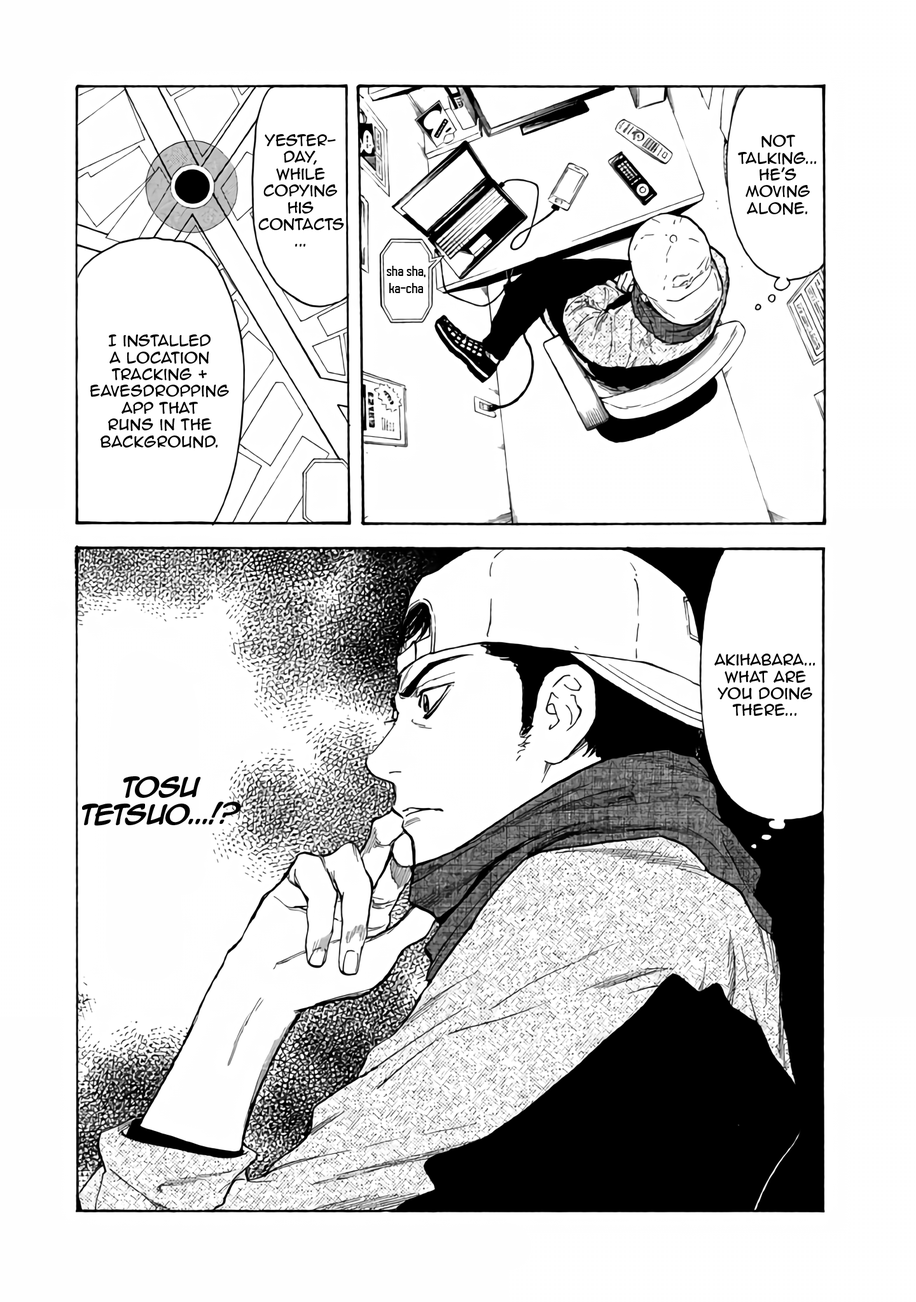
<style>
.page{position:relative;width:916px;height:1302px;background:#ffffff}
.page>*{position:absolute;margin:0}
.t1{font:14px "AnimeAce2.0BB";color:#000000}
.t2{font:14px "AutobusBold";color:#000000}
.t3{font:22.9px "AnimeAce2.0BB-Bold";color:#000000}
</style>
<div class="page">
<p class="t1" style="left:258px;top:134px;width:86px;height:113px;text-align:center">Yester-<br>day, while copying his contacts...</p>
<p class="t1" style="left:738px;top:135px;width:78px;height:80px;text-align:center">Not talking... He’s moving alone.</p>
<p class="t2" style="left:387px;top:266px;width:38px;height:27px;text-align:center">sha sha, <br>ka-cha</p>
<p class="t1" style="left:90px;top:334px;width:139px;height:114px;text-align:center">I installed a location tracking + eavesdropping app that runs in the background.</p>
<p class="t1" style="left:714px;top:654px;width:101px;height:62px;text-align:center">Akihabara... <br>What are you doing there...</p>
<p class="t3" style="left:82px;top:776px;width:159px;height:50px;text-align:center">Tosu Tetsuo...!?</p>
</div>
